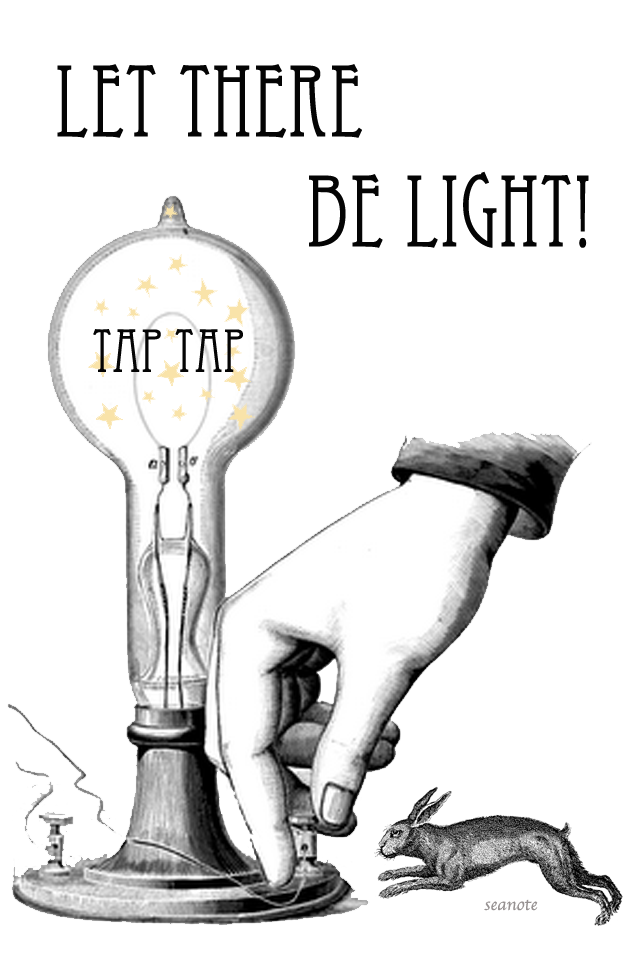
<style>
.page{position:relative;width:640px;height:960px;background:#ffffff}
.page>*{position:absolute;margin:0}
.t1{font:100px/110px "EccentricStd";color:#040404}
.t2{font:60px "EccentricStd";color:#040404}
.t3{font:18px "Apple-Chancery";color:#979292}
</style>
<div class="page">
<p class="t1" style="left:57px;top:64px;width:532px;height:184px">Let There <br>        Be Light!</p>
<p class="t2" style="left:93px;top:329px;width:150px;height:43px">Tap Tap</p>
<p class="t3" style="left:484px;top:899px;width:54px;height:12px">seanote</p>
</div>
